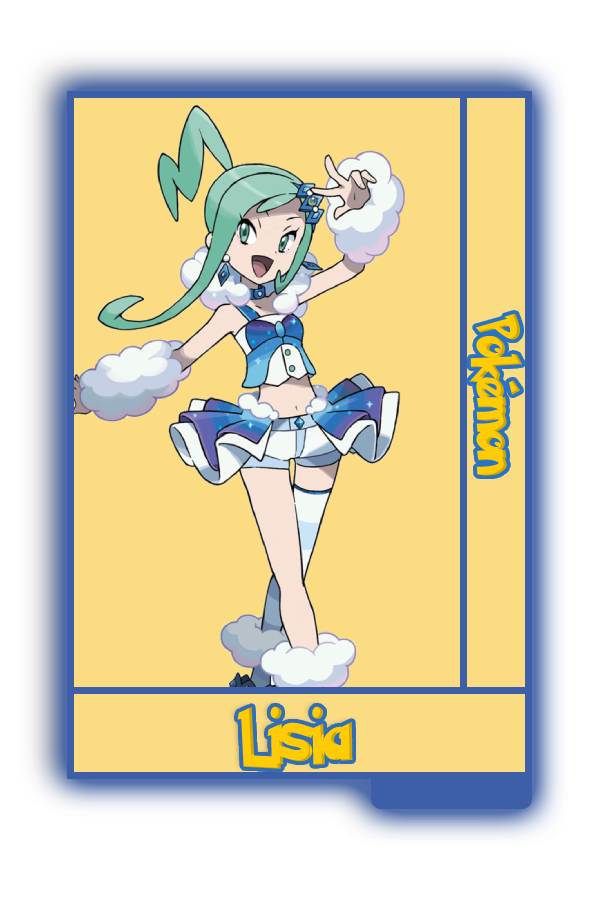
<style>
.page{position:relative;width:600px;height:900px;background:#fbdc83}
.page>*{position:absolute;margin:0}
.t1{font:48.8px "PokemonSolidNormal";color:#ffcb05;scale:0.8 1}
.t2{font:56.6px "PokemonSolidNormal";color:#ffcb05;scale:0.92 1}
</style>
<div class="page">
<p class="t1" style="left:469px;top:313px;width:54px;height:163px;rotate:90deg">Pokémon</p>
<p class="t2" style="left:237px;top:706px;width:116px;height:63px">Lisia</p>
</div>
